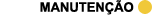
<style>
.page{position:relative;width:154px;height:15px;background:#ffffff}
.page>*{position:absolute;margin:0}
.t1{font:13px "Arial-BoldMT";color:#000000}
</style>
<div class="page">
<p class="t1" style="left:40px;top:0px;width:94px;height:15px">MANUTENÇÃO</p>
</div>
